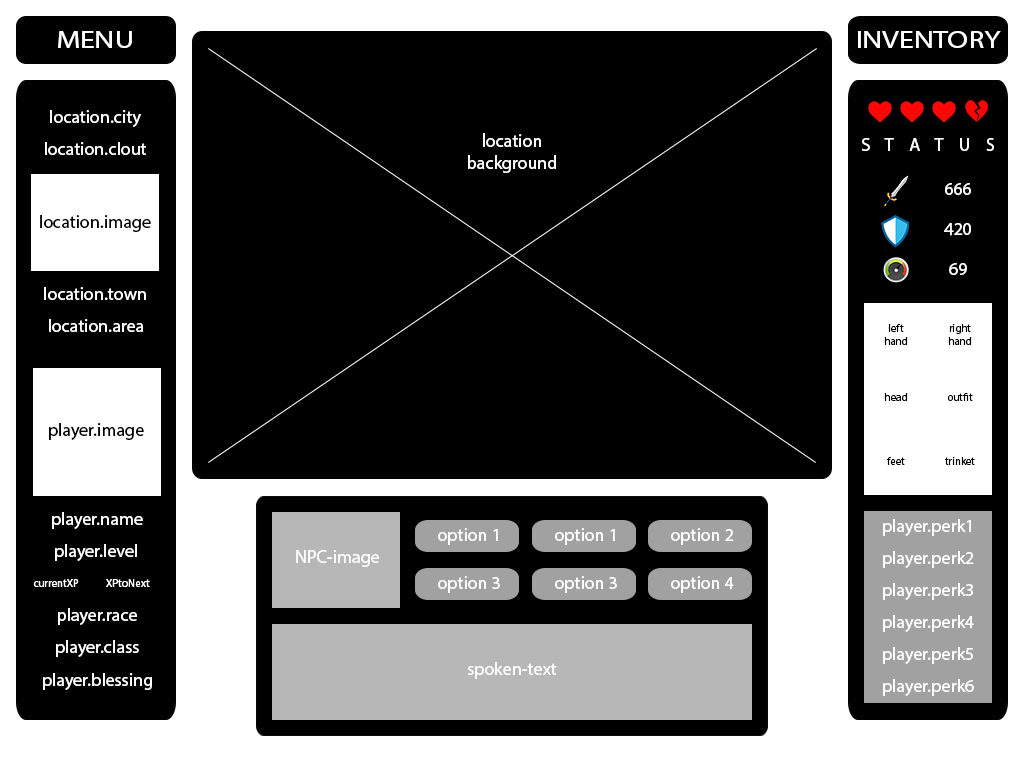
<style>
.page{position:relative;width:1024px;height:768px;background:#000000}
.page>*{position:absolute;margin:0}
.t1{font:24px "MyriadHebrew-Regular";color:#ffffff;scale:1.25 1}
.t2{font:18px "MyriadHebrew-Regular";color:#ffffff}
.t3{font:18.7px "MyriadHebrew-Regular";color:#ffffff;scale:0.96 1}
.t4{font:18px "MyriadHebrew-Regular";color:#000000}
.t5{font:11px "MyriadHebrew-Regular";color:#000000}
.t6{font:11px "MyriadHebrew-Regular";color:#ffffff}
</style>
<div class="page">
<p class="t1" style="left:58px;top:31px;width:74px;height:17px">MENU</p>
<p class="t1" style="left:858px;top:31px;width:143px;height:17px">INVENTORY</p>
<p class="t2" style="left:50px;top:110px;width:91px;height:17px">location.city</p>
<p class="t3" style="left:468px;top:133px;width:88px;height:40px;text-align:center">location<br>background</p>
<p class="t2" style="left:45px;top:142px;width:101px;height:13px">location.clout</p>
<p class="t2" style="left:862px;top:138px;width:132px;height:13px">S    T    A    T    U    S</p>
<p class="t2" style="left:945px;top:183px;width:26px;height:12px">666</p>
<p class="t4" style="left:40px;top:215px;width:111px;height:17px">location.image</p>
<p class="t2" style="left:944px;top:223px;width:27px;height:13px">420</p>
<p class="t2" style="left:949px;top:263px;width:18px;height:12px">69</p>
<p class="t2" style="left:44px;top:287px;width:102px;height:13px">location.town</p>
<p class="t2" style="left:49px;top:319px;width:95px;height:13px">location.area</p>
<p class="t5" style="left:884px;top:324px;width:24px;height:21px;text-align:center">left<br>hand</p>
<p class="t5" style="left:948px;top:324px;width:24px;height:21px;text-align:center">right<br>hand</p>
<p class="t5" style="left:884px;top:393px;width:24px;height:8px">head</p>
<p class="t5" style="left:947px;top:393px;width:26px;height:8px">outfit</p>
<p class="t4" style="left:49px;top:423px;width:95px;height:17px">player.image</p>
<p class="t5" style="left:887px;top:457px;width:18px;height:8px">feet</p>
<p class="t5" style="left:945px;top:457px;width:30px;height:8px">trinket</p>
<p class="t2" style="left:52px;top:512px;width:91px;height:17px">player.name</p>
<p class="t2" style="left:883px;top:519px;width:88px;height:17px">player.perk1</p>
<p class="t2" style="left:438px;top:528px;width:60px;height:17px">option 1</p>
<p class="t2" style="left:555px;top:528px;width:60px;height:17px">option 1</p>
<p class="t2" style="left:671px;top:528px;width:63px;height:17px">option 2</p>
<p class="t2" style="left:55px;top:544px;width:82px;height:17px">player.level</p>
<p class="t2" style="left:296px;top:550px;width:83px;height:17px">NPC-image</p>
<p class="t2" style="left:883px;top:551px;width:91px;height:17px">player.perk2</p>
<p class="t6" style="left:33px;top:579px;width:46px;height:8px">currentXP</p>
<p class="t6" style="left:106px;top:579px;width:44px;height:8px">XPtoNext</p>
<p class="t2" style="left:438px;top:576px;width:62px;height:17px">option 3</p>
<p class="t2" style="left:555px;top:576px;width:62px;height:17px">option 3</p>
<p class="t2" style="left:671px;top:576px;width:63px;height:17px">option 4</p>
<p class="t2" style="left:883px;top:583px;width:90px;height:17px">player.perk3</p>
<p class="t2" style="left:58px;top:608px;width:79px;height:17px">player.race</p>
<p class="t2" style="left:883px;top:615px;width:91px;height:17px">player.perk4</p>
<p class="t2" style="left:56px;top:640px;width:83px;height:17px">player.class</p>
<p class="t2" style="left:883px;top:647px;width:90px;height:17px">player.perk5</p>
<p class="t2" style="left:467px;top:662px;width:90px;height:17px">spoken-text</p>
<p class="t2" style="left:43px;top:673px;width:109px;height:17px">player.blessing</p>
<p class="t2" style="left:883px;top:679px;width:91px;height:17px">player.perk6</p>
</div>
